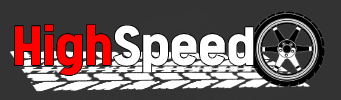
<style>
.page{position:relative;width:341px;height:100px;background:#333333}
.page>*{position:absolute;margin:0}
.t1{font:50.4px "dDiam";color:#ffffff}
.t2{font:50.4px "dDiam";color:#ff0000}
</style>
<div class="page">
<p class="t1" style="left:15px;top:24px;width:239px;height:52px"><span class="t2">High</span>Speed</p>
</div>
